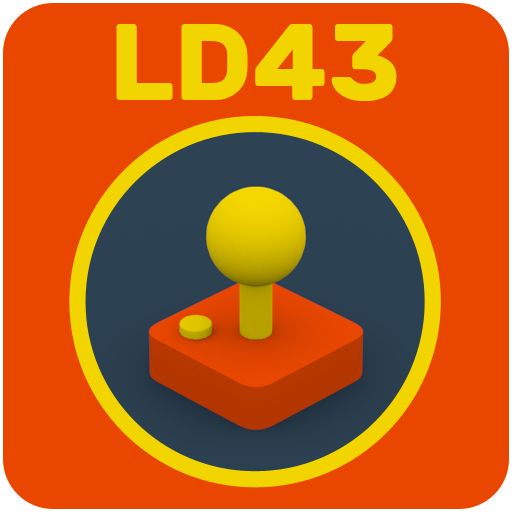
<style>
.page{position:relative;width:512px;height:512px;background:#e94700}
.page>*{position:absolute;margin:0}
.t1{font:108px "Rubik-Bold";color:#f2d500}
</style>
<div class="page">
<p class="t1" style="left:116px;top:24px;width:281px;height:77px">LD43</p>
</div>
